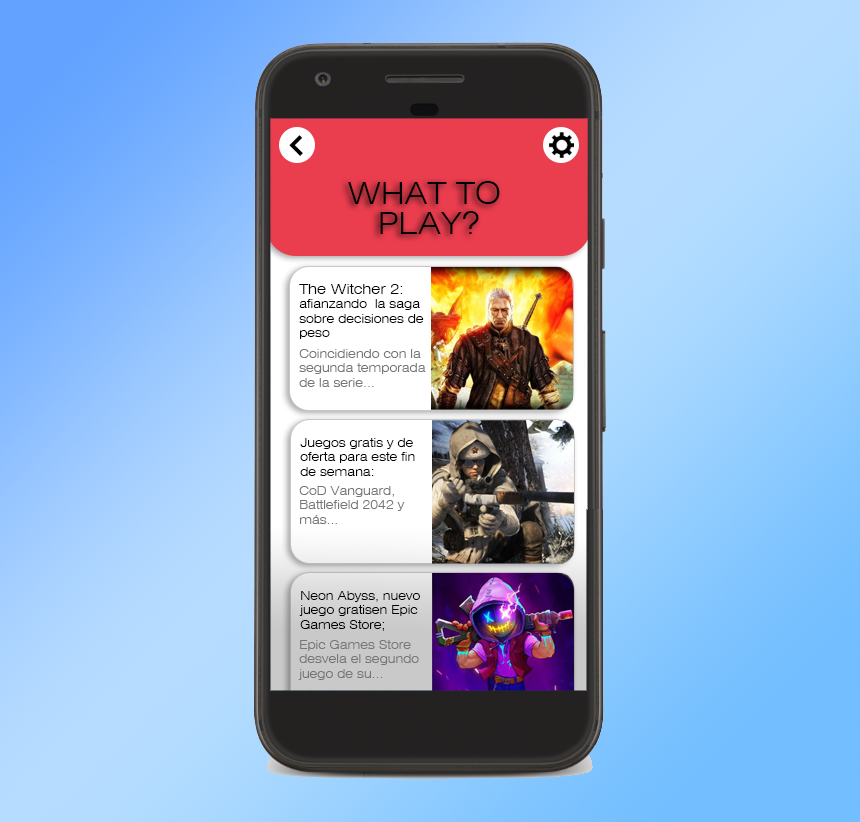
<style>
.page{position:relative;width:860px;height:822px}
.page>*{position:absolute;margin:0}
.t1{font:30px/30px "Swiss721BT-LightExtended";color:#000000}
.t2{font:12px "Swiss721BT-LightExtended";color:#000000}
.t3{font:14px "Swiss721BT-LightExtended";color:#000000}
.t4{font:12px "Swiss721BT-LightExtended";color:#747779}
</style>
<div class="page">
<p class="t1" style="left:348px;top:181px;width:152px;height:53px;text-align:center">WHAT TO <br>PLAY?</p>
<p class="t2" style="left:299px;top:284px;width:125px;height:55px"><span class="t3">The Witcher 2: <br></span>afianzando  la saga <br>sobre decisiones de <br>peso</p>
<p class="t4" style="left:299px;top:349px;width:127px;height:38px">Coincidiendo con la <br>segunda temporada <br>de la serie...</p>
<p class="t2" style="left:300px;top:438px;width:115px;height:38px">Juegos gratis y de <br>oferta para este fin <br>de semana:</p>
<p class="t4" style="left:299px;top:486px;width:106px;height:38px">CoD Vanguard, <br>Battlefield 2042 y <br>más...</p>
<p class="t2" style="left:299px;top:591px;width:121px;height:40px">Neon Abyss, nuevo <br>juego gratisen Epic <br>Games Store;</p>
<p class="t4" style="left:298px;top:640px;width:121px;height:40px">Epic Games Store <br>desvela el segundo <br>juego de su...</p>
</div>
